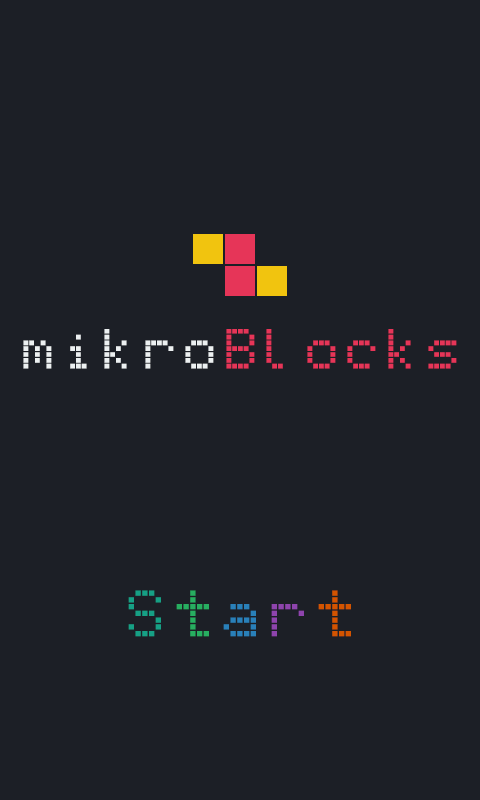
<style>
.page{position:relative;width:480px;height:800px;background:#1c1f26}
.page>*{position:absolute;margin:0}
.t1{font:46.5px "Erbos-Draco-1st-Open-NBP";color:#e63558}
.t2{font:46.5px "Erbos-Draco-1st-Open-NBP";color:#ecf0f1}
.t3{font:54px "Erbos-Draco-1st-Open-NBP";color:#16a085}
.t4{font:54px "Erbos-Draco-1st-Open-NBP";color:#27ae60}
.t5{font:54px "Erbos-Draco-1st-Open-NBP";color:#2980b9}
.t6{font:54px "Erbos-Draco-1st-Open-NBP";color:#8e44ad}
.t7{font:54px "Erbos-Draco-1st-Open-NBP";color:#d35400}
</style>
<div class="page">
<p class="t1" style="left:23px;top:329px;width:434px;height:40px"><span class="t2">mikro</span>Blocks</p>
<p class="t3" style="left:128px;top:590px;width:223px;height:47px">S<span class="t4">t</span><span class="t5">a</span><span class="t6">r</span><span class="t7">t</span></p>
</div>
